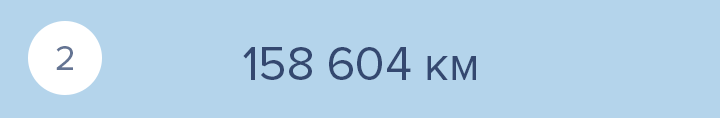
<style>
.page{position:relative;width:720px;height:118px;background:#b4d4eb}
.page>*{position:absolute;margin:0}
.t1{font:36px "ProximaNova-Regular";color:#647493}
.t2{font:48px "ProximaNova-Regular";color:#344870}
</style>
<div class="page">
<p class="t1" style="left:56px;top:46px;width:17px;height:24px">2</p>
<p class="t2" style="left:243px;top:47px;width:233px;height:33px">158 604 км</p>
</div>
